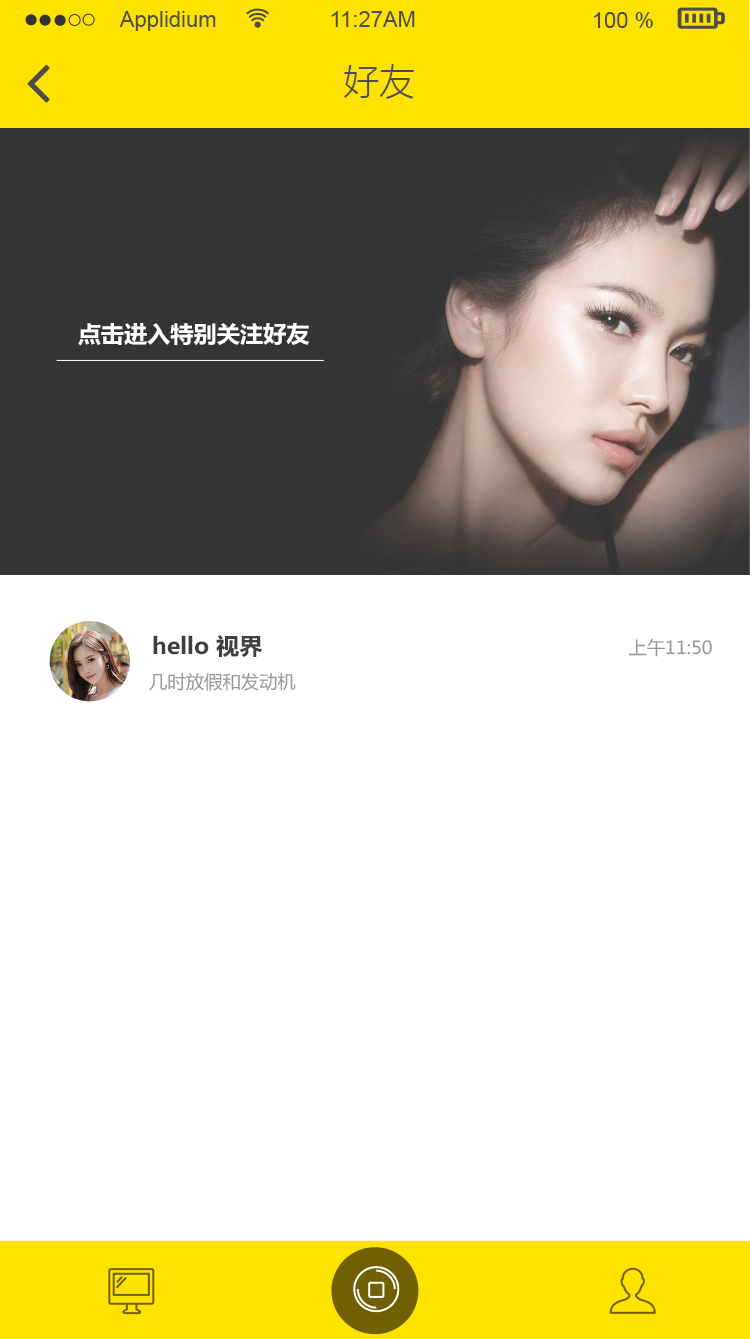
<style>
.page{position:relative;width:750px;height:1339px;background:#ffffff}
.page>*{position:absolute;margin:0}
.t1{font:22px "ArialMT";color:#4d4d4d}
.t2{font:36px "MicrosoftYaHeiLight";color:#4d4d4d}
.t3{font:22.7px "MicrosoftYaHei-Bold";color:#ffffff}
.t4{font:22.7px "MicrosoftYaHei-Bold";color:#3f3f3f}
.t5{font:18px "MicrosoftYaHei";color:#999999}
</style>
<div class="page">
<p class="t1" style="left:119px;top:11px;width:97px;height:20px">Applidium</p>
<p class="t1" style="left:331px;top:11px;width:84px;height:16px">11:27AM</p>
<p class="t1" style="left:594px;top:12px;width:59px;height:16px">100 %</p>
<p class="t2" style="left:344px;top:64px;width:70px;height:35px">好友</p>
<p class="t3" style="left:78px;top:323px;width:232px;height:23px">点击进入特别关注好友</p>
<p class="t4" style="left:153px;top:635px;width:110px;height:22px">hello 视界</p>
<p class="t5" style="left:628px;top:638px;width:84px;height:19px">上午11:50</p>
<p class="t5" style="left:149px;top:672px;width:147px;height:19px">几时放假和发动机</p>
</div>
